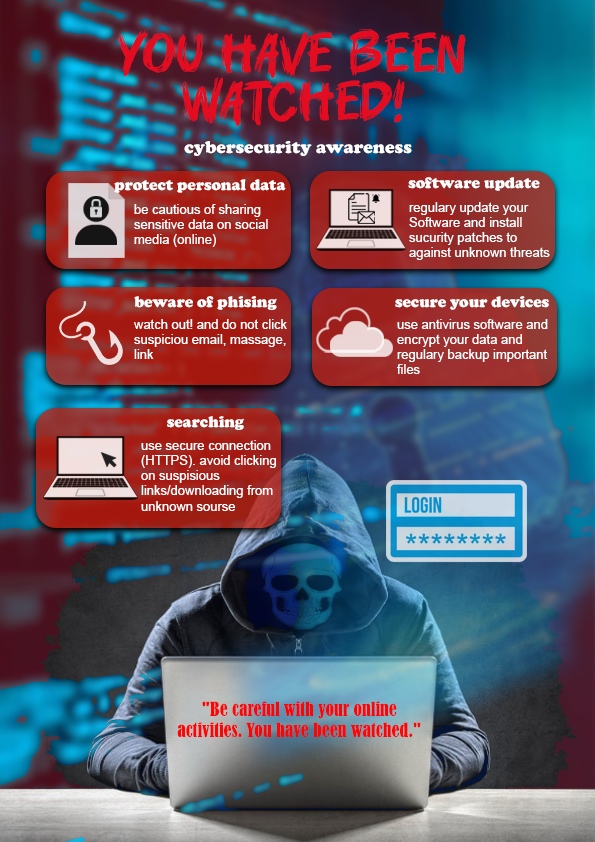
<style>
.page{position:relative;width:595px;height:842px}
.page>*{position:absolute;margin:0}
.t1{font:48px/48px "Runtoe";color:#e30c21}
.t2{font:18px "CooperBlack";color:#ffffff}
.t3{font:16px "CooperBlack";color:#ffffff}
.t4{font:13px/15.2px "ArialMT";color:#ffffff}
.t5{font:18px/21.1px "BernardMT-Condensed";color:#fe0505}
</style>
<div class="page">
<p class="t1" style="left:117px;top:29px;width:349px;height:98px;text-align:center">You have been<br>watched!</p>
<p class="t2" style="left:184px;top:141px;width:228px;height:15px">cybersecurity awareness</p>
<p class="t3" style="left:114px;top:179px;width:172px;height:14px">protect personal data</p>
<p class="t3" style="left:408px;top:177px;width:132px;height:14px">software update</p>
<p class="t4" style="left:134px;top:204px;width:134px;height:43px">be cautious of sharing sensitive data on social media (online)</p>
<p class="t4" style="left:409px;top:202px;width:141px;height:58px">regulary update your Software and install sucurity patches to against unknown threats</p>
<p class="t3" style="left:134px;top:296px;width:143px;height:14px">beware of phising</p>
<p class="t3" style="left:395px;top:296px;width:154px;height:14px">secure your devices</p>
<p class="t4" style="left:134px;top:319px;width:153px;height:40px">watch out! and do not click suspiciou email, massage, link</p>
<p class="t4" style="left:397px;top:319px;width:151px;height:55px">use antivirus software and encrypt your data and regulary backup important files</p>
<p class="t3" style="left:167px;top:416px;width:77px;height:14px">searching</p>
<p class="t4" style="left:141px;top:440px;width:135px;height:71px">use secure connection (HTTPS). avoid clicking on suspisious links/downloading from unknown sourse</p>
<p class="t5" style="left:177px;top:701px;width:244px;height:36px;text-align:center">"Be careful with your online activities. You have been watched."</p>
</div>
